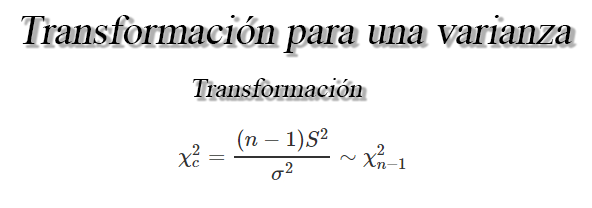
<style>
.page{position:relative;width:592px;height:208px;background:#ffffff}
.page>*{position:absolute;margin:0}
.t1{font:30.5px "TimesNewRomanPSMT";color:#000000;font-style:italic}
.t2{font:20.4px "TimesNewRomanPSMT";color:#000000;font-style:italic}
</style>
<div class="page">
<p class="t1" style="left:21px;top:15px;width:551px;height:38px">Transformación para una varianza</p>
<p class="t2" style="left:192px;top:78px;width:170px;height:19px">Transformación</p>
</div>
